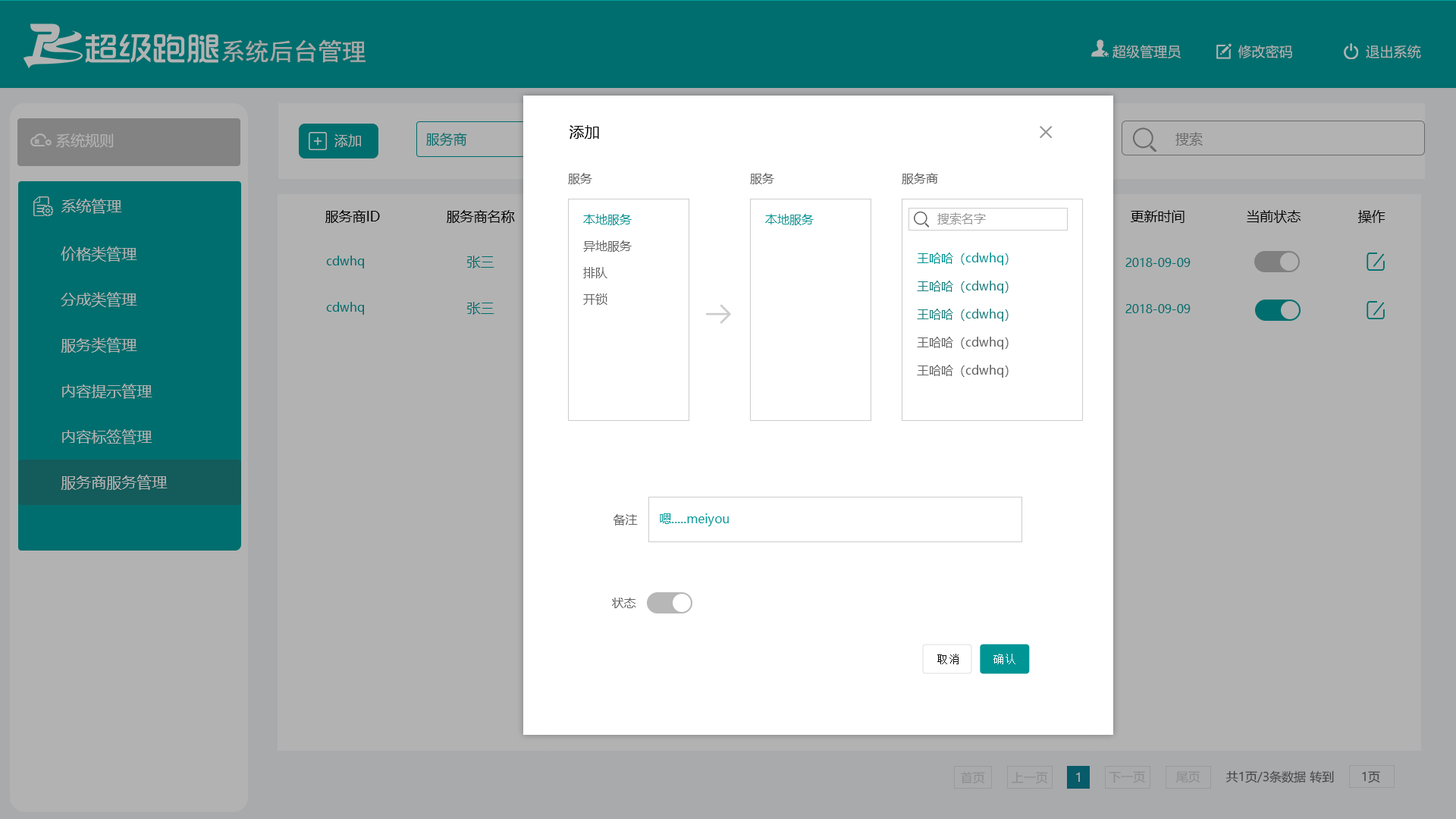
<style>
.page{position:relative;width:1456px;height:819px;background:#b2b2b2}
.page>*{position:absolute;margin:0}
.t1{font:24.4px "SimHei";color:#a8a8a8}
.t2{font:13.7px "MicrosoftYaHei";color:#b2b2b2}
.t3{font:15.2px "MicrosoftYaHei";color:#000000}
.t4{font:14.5px "MicrosoftYaHei";color:#b2b2b2}
.t5{font:13.6px "MicrosoftYaHei";color:#b2b2b2}
.t6{font:13.6px "MicrosoftYaHei";color:#006e6e}
.t7{font:13.6px "MicrosoftYaHei";color:#6b6b6b}
.t8{font:12.1px "MicrosoftYaHei";color:#666666}
.t9{font:15.2px "MicrosoftYaHei";color:#b2b2b2}
.t10{font:13.6px "MicrosoftYaHei";color:#000000}
.t11{font:12.1px "MicrosoftYaHei";color:#009595}
.t12{font:12.1px "MicrosoftYaHei";color:#999999}
.t13{font:12.1px "MicrosoftYaHei";color:#006e6e}
.t14{font:12.1px "MicrosoftYaHei";color:#1c8282}
.t15{font:12.1px "MicrosoftYaHei";color:#009e9e}
.t16{font:11.5px "SimSun";letter-spacing:0.075em;color:#111111}
.t17{font:11.5px "SimSun";letter-spacing:0.075em;color:#ffffff}
.t18{font:12.1px "MicrosoftYaHei";color:#8e8e8e}
.t19{font:12.1px "MicrosoftYaHei";color:#b2b2b2}
.t20{font:12.1px "MicrosoftYaHei";color:#464646}
</style>
<div class="page">
<p class="t1" style="left:222px;top:39px;width:144px;height:24px">系统后台管理</p>
<p class="t2" style="left:1112px;top:45px;width:309px;height:13px">超级管理员              修改密码                  退出系统</p>
<p class="t3" style="left:570px;top:125px;width:29px;height:14px">添加</p>
<p class="t4" style="left:56px;top:133px;width:58px;height:15px">系统规则</p>
<p class="t5" style="left:334px;top:134px;width:27px;height:13px">添加</p>
<p class="t6" style="left:426px;top:132px;width:41px;height:14px">服务商</p>
<p class="t7" style="left:1175px;top:132px;width:28px;height:14px">搜索</p>
<p class="t8" style="left:568px;top:173px;width:24px;height:11px">服务</p>
<p class="t8" style="left:750px;top:173px;width:24px;height:11px">服务</p>
<p class="t8" style="left:902px;top:173px;width:36px;height:11px">服务商</p>
<p class="t9" style="left:61px;top:199px;width:61px;height:15px">系统管理</p>
<p class="t10" style="left:325px;top:210px;width:55px;height:13px">服务商ID</p>
<p class="t10" style="left:447px;top:210px;width:68px;height:13px">服务商名称</p>
<p class="t11" style="left:583px;top:214px;width:49px;height:11px">本地服务</p>
<p class="t11" style="left:765px;top:214px;width:49px;height:11px">本地服务</p>
<p class="t12" style="left:937px;top:212px;width:49px;height:12px">搜索名字</p>
<p class="t10" style="left:1131px;top:210px;width:54px;height:13px">更新时间</p>
<p class="t10" style="left:1247px;top:210px;width:54px;height:13px">当前状态</p>
<p class="t10" style="left:1358px;top:210px;width:27px;height:13px">操作</p>
<p class="t8" style="left:583px;top:240px;width:49px;height:12px">异地服务</p>
<p class="t9" style="left:61px;top:246px;width:76px;height:16px">价格类管理</p>
<p class="t13" style="left:326px;top:256px;width:38px;height:12px">cdwhq</p>
<p class="t6" style="left:467px;top:256px;width:27px;height:12px">张三</p>
<p class="t11" style="left:917px;top:253px;width:92px;height:12px">王哈哈（cdwhq）</p>
<p class="t13" style="left:1125px;top:258px;width:66px;height:9px">2018-09-09</p>
<p class="t8" style="left:583px;top:267px;width:24px;height:11px">排队</p>
<p class="t14" style="left:917px;top:281px;width:92px;height:12px">王哈哈（cdwhq）</p>
<p class="t9" style="left:61px;top:292px;width:76px;height:15px">分成类管理</p>
<p class="t8" style="left:583px;top:293px;width:24px;height:12px">开锁</p>
<p class="t13" style="left:326px;top:302px;width:38px;height:13px">cdwhq</p>
<p class="t6" style="left:467px;top:302px;width:27px;height:13px">张三</p>
<p class="t13" style="left:1125px;top:304px;width:66px;height:9px">2018-09-09</p>
<p class="t14" style="left:917px;top:309px;width:92px;height:13px">王哈哈（cdwhq）</p>
<p class="t9" style="left:61px;top:337px;width:76px;height:16px">服务类管理</p>
<p class="t8" style="left:917px;top:337px;width:92px;height:13px">王哈哈（cdwhq）</p>
<p class="t8" style="left:917px;top:365px;width:92px;height:13px">王哈哈（cdwhq）</p>
<p class="t9" style="left:62px;top:384px;width:90px;height:15px">内容提示管理</p>
<p class="t9" style="left:62px;top:429px;width:90px;height:15px">内容标签管理</p>
<p class="t9" style="left:61px;top:475px;width:107px;height:15px">服务商服务管理</p>
<p class="t8" style="left:613px;top:514px;width:25px;height:12px">备注</p>
<p class="t15" style="left:660px;top:513px;width:69px;height:13px">嗯.....meiyou</p>
<p class="t8" style="left:612px;top:598px;width:24px;height:10px">状态</p>
<p class="t16" style="left:937px;top:654px;width:22px;height:10px">取消</p>
<p class="t17" style="left:993px;top:654px;width:22px;height:10px">确认</p>
<p class="t18" style="left:961px;top:771px;width:24px;height:13px">首页</p>
<p class="t18" style="left:1012px;top:772px;width:36px;height:12px">上一页</p>
<p class="t19" style="left:1076px;top:772px;width:4px;height:10px">1</p>
<p class="t18" style="left:1109px;top:771px;width:36px;height:12px">下一页</p>
<p class="t18" style="left:1176px;top:771px;width:24px;height:12px">尾页</p>
<p class="t20" style="left:1226px;top:770px;width:108px;height:13px">共1页/3条数据 转到</p>
<p class="t20" style="left:1362px;top:771px;width:18px;height:12px">1页</p>
</div>
